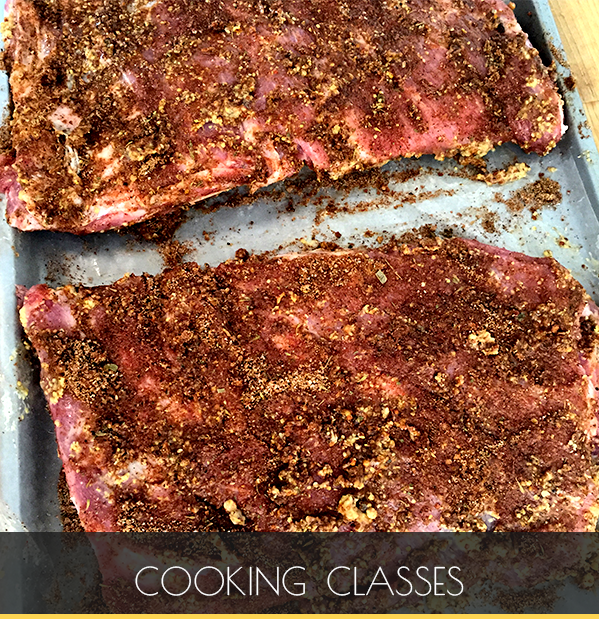
<style>
.page{position:relative;width:599px;height:619px}
.page>*{position:absolute;margin:0}
.t1{font:53.3px "PoiretOne-Regular";color:#ffffff;font-variant:small-caps}
</style>
<div class="page">
<p class="t1" style="left:135px;top:566px;width:329px;height:30px">cooking classes</p>
</div>
